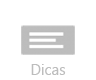
<style>
.page{position:relative;width:96px;height:80px;background:#ffffff}
.page>*{position:absolute;margin:0}
.t1{font:15px "SegoeUI";color:#bdbdbd}
</style>
<div class="page">
<p class="t1" style="left:31px;top:64px;width:35px;height:11px">Dicas</p>
</div>
